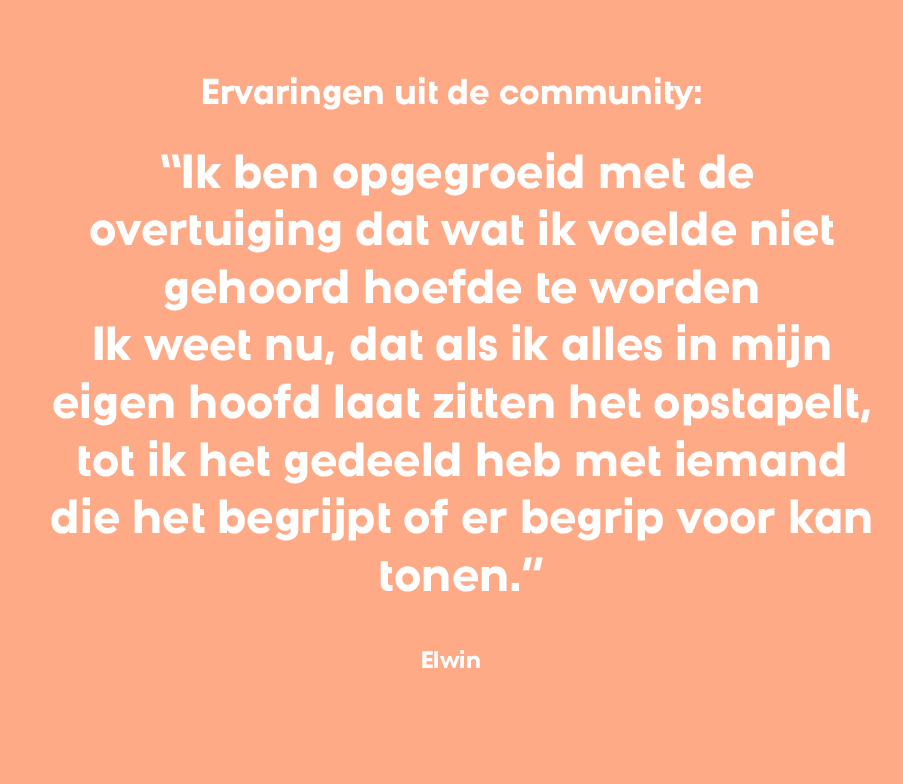
<style>
.page{position:relative;width:903px;height:784px;background:#ffaa86}
.page>*{position:absolute;margin:0}
.t1{font:36px "DNpro-Bold";color:#ffffff}
.t2{font:48px "DNpro-Bold";color:#ffffff}
.t3{font:24px "DNpro-Bold";color:#ffffff}
</style>
<div class="page">
<p class="t1" style="left:203px;top:77px;width:498px;height:33px">Ervaringen uit de community:</p>
<p class="t2" style="left:51px;top:152px;width:820px;height:440px;text-align:center">“Ik ben opgegroeid met de <br>overtuiging dat wat ik voelde niet<br>gehoord hoefde te worden<br>Ik weet nu, dat als ik alles in mijn<br>eigen hoofd laat zitten het opstapelt,<br>tot ik het gedeeld heb met iemand<br>die het begrijpt of er begrip voor kan<br>tonen.”</p>
<p class="t3" style="left:422px;top:650px;width:58px;height:18px">Elwin</p>
</div>
